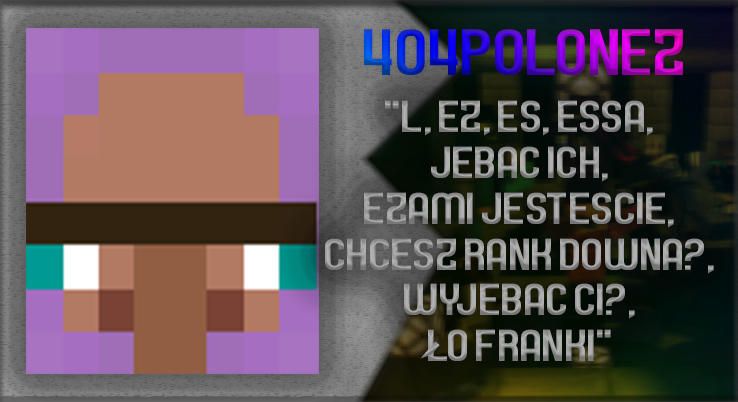
<style>
.page{position:relative;width:738px;height:402px}
.page>*{position:absolute;margin:0}
.t1{font:66.7px "Septacharge"}
.t2{font:45.8px/45.8px "Septacharge";color:#9b9b9b}
.t3{font:130.2px "Septacharge";scale:0.35 1}
</style>
<div class="page">
<p class="t1" style="left:364px;top:29px;width:319px;height:46px">404POLONEZ</p>
<p class="t2" style="left:325px;top:100px;width:389px;height:261px;text-align:center">"L, EZ, ES, ESSA,<br>JEBAC ICH,<br>EZAMI JESTESCIE,<br>CHCESZ RANK DOWNA?,<br>WYJEBAC CI?,<br>LO FRANKI"</p>
<p class="t3" style="left:420px;top:341px;width:20px;height:18px;rotate:41deg">,</p>
</div>
